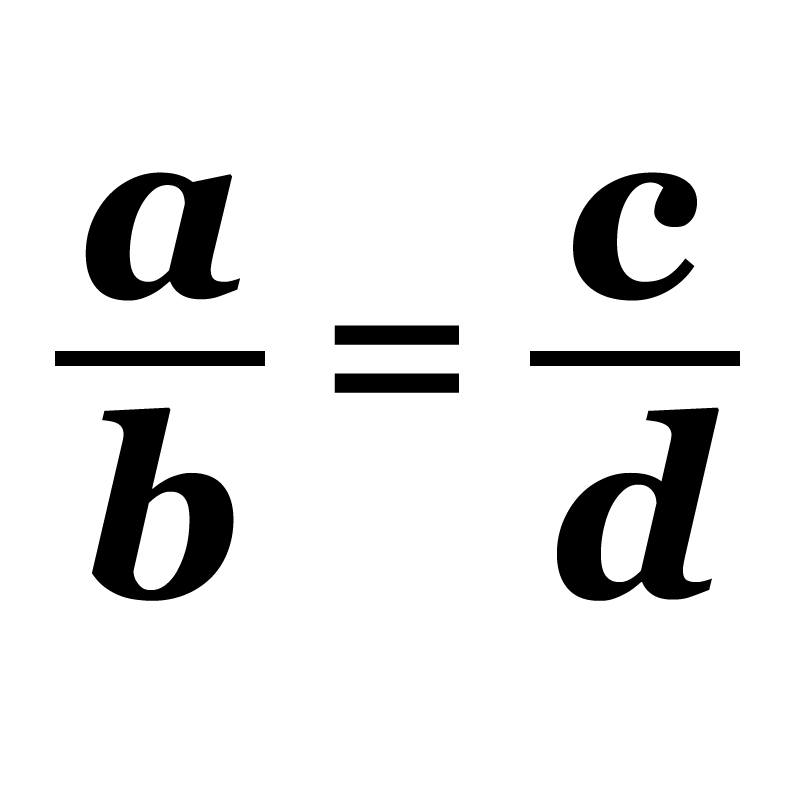
<style>
.page{position:relative;width:800px;height:800px;background:#ffffff}
.page>*{position:absolute;margin:0}
.t1{font:250.3px "Georgia-BoldItalic";letter-spacing:0.2em;color:#000000}
.t2{font:237.2px "Georgia-BoldItalic";letter-spacing:0.2em;color:#000000}
</style>
<div class="page">
<p class="t1" style="left:85px;top:172px;width:155px;height:429px;text-align:center">a<br>b</p>
<p class="t1" style="left:557px;top:172px;width:162px;height:429px;text-align:center">c<br>d</p>
<p class="t2" style="left:334px;top:325px;width:125px;height:68px">=</p>
</div>
